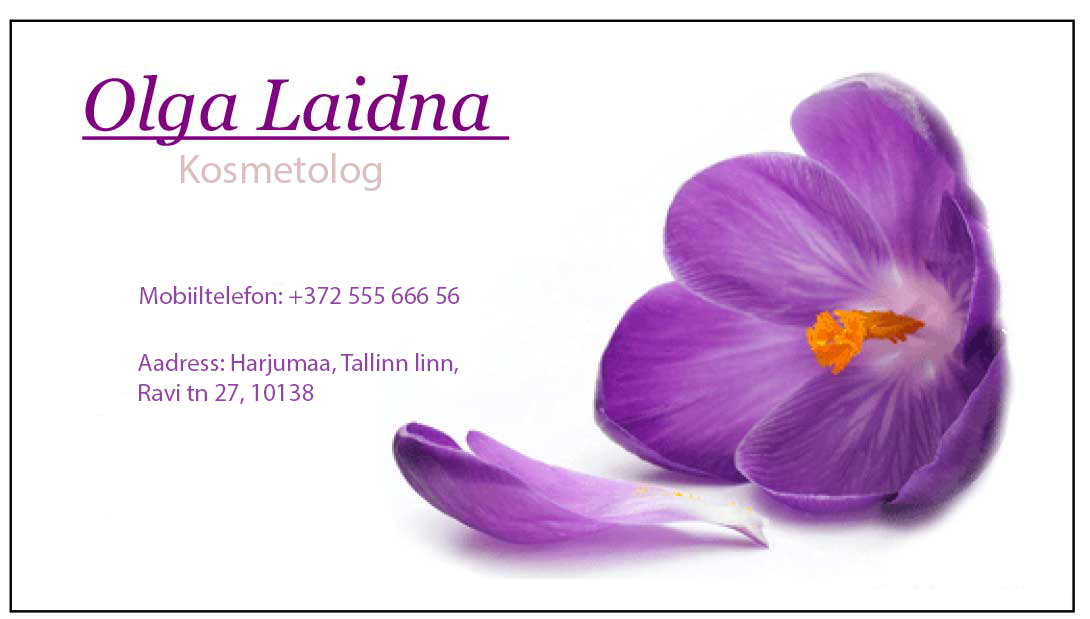
<style>
.page{position:relative;width:1090px;height:619px;background:#ffffff}
.page>*{position:absolute;margin:0}
.t1{font:41px "MyriadPro-Regular";color:#d9bfbe}
.t2{font:25px "MyriadPro-Regular";color:#9343a6}
</style>
<div class="page">
<p class="t1" style="left:181px;top:153px;width:201px;height:38px">Kosmetolog</p>
<p class="t2" style="left:140px;top:286px;width:320px;height:18px">Mobiiltelefon: +372 555 666 56</p>
<p class="t2" style="left:138px;top:353px;width:320px;height:52px">Aadress: Harjumaa, Tallinn linn, <br>Ravi tn 27, 10138</p>
</div>
